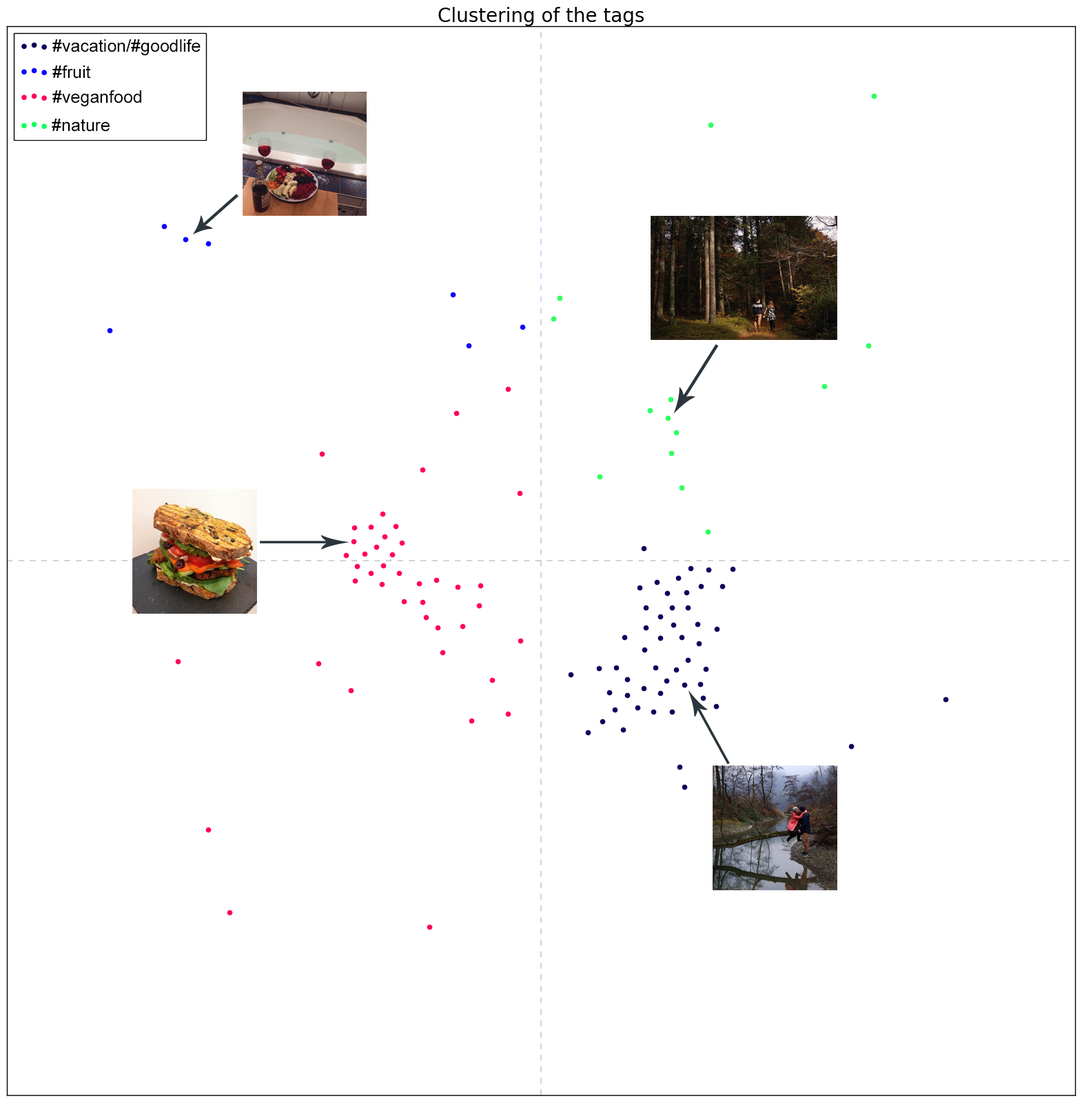
<style>
.page{position:relative;width:1082px;height:1102px;background:#ffffff}
.page>*{position:absolute;margin:0}
.t1{font:17.2px "ArialMT";color:#000000}
</style>
<div class="page">
<p class="t1" style="left:52px;top:39px;width:149px;height:17px">#vacation/#goodlife</p>
<p class="t1" style="left:52px;top:65px;width:39px;height:14px">#fruit</p>
<p class="t1" style="left:52px;top:90px;width:89px;height:17px">#veganfood</p>
<p class="t1" style="left:52px;top:119px;width:58px;height:13px">#nature</p>
</div>
